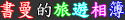
<style>
.page{position:relative;width:125px;height:20px;background:#333333}
.page>*{position:absolute;margin:0}
.t1{font:18px "DFKaiShu-SB-Estd-BF";color:#ffffff}
</style>
<div class="page">
<p class="t1" style="left:0px;top:1px;width:15px;height:17px">書</p>
<p class="t1" style="left:18px;top:1px;width:15px;height:17px">曼</p>
<p class="t1" style="left:37px;top:2px;width:14px;height:16px">的</p>
<p class="t1" style="left:54px;top:2px;width:17px;height:15px">旅</p>
<p class="t1" style="left:72px;top:2px;width:17px;height:16px">遊</p>
<p class="t1" style="left:91px;top:2px;width:15px;height:16px">相</p>
<p class="t1" style="left:109px;top:1px;width:15px;height:17px">簿</p>
</div>
